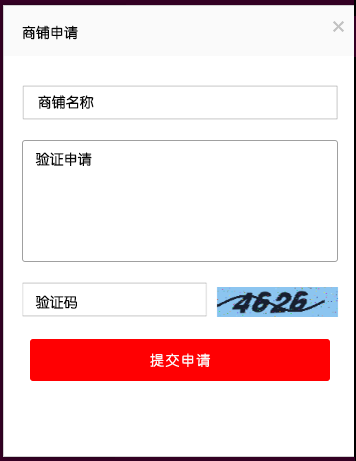
<style>
.page{position:relative;width:356px;height:461px;background:#ffffff}
.page>*{position:absolute;margin:0}
.t1{font:14px "STYuanti-SC-Regular";color:#070707}
</style>
<div class="page">
<p class="t1" style="left:22px;top:25px;width:56px;height:15px">商铺申请</p>
<p class="t1" style="left:38px;top:95px;width:56px;height:14px">商铺名称</p>
<p class="t1" style="left:35px;top:152px;width:57px;height:14px">验证申请</p>
<p class="t1" style="left:35px;top:295px;width:42px;height:14px">验证码</p>
</div>
